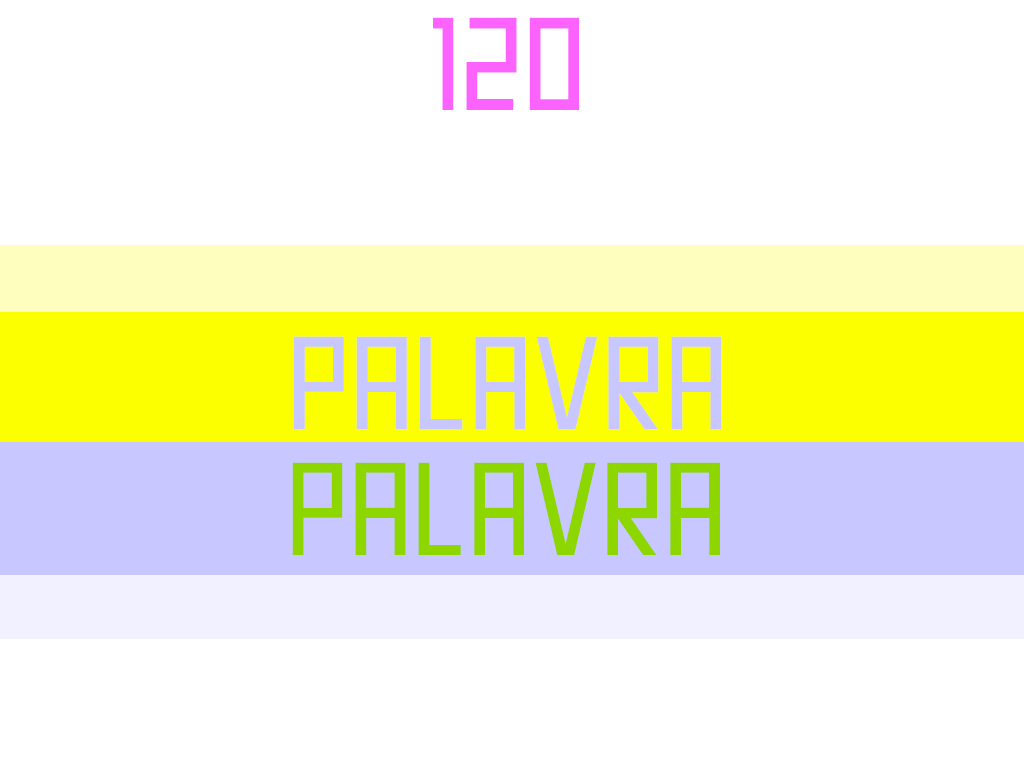
<style>
.page{position:relative;width:1024px;height:768px;background:#ffffff}
.page>*{position:absolute;margin:0}
.t1{font:150px "Pastelaria-Regular";color:#fc63fe}
.t2{font:150px "Pastelaria-Regular";color:#c8c7ff}
.t3{font:150px "Pastelaria-Regular";color:#8cd500}
</style>
<div class="page">
<p class="t1" style="left:433px;top:17px;width:146px;height:93px">120</p>
<p class="t2" style="left:294px;top:336px;width:428px;height:93px">PALAVRA</p>
<p class="t3" style="left:292px;top:462px;width:428px;height:93px">PALAVRA</p>
</div>
